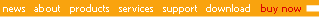
<style>
.page{position:relative;width:319px;height:17px;background:#f9a30e}
.page>*{position:absolute;margin:0}
.t1{font:9.8px "Tahoma";letter-spacing:0.01em;color:#ffffff}
.t2{font:9.8px "Tahoma";letter-spacing:0.01em;color:#db0303}
</style>
<div class="page">
<p class="t1" style="left:34px;top:4px;width:26px;height:8px">about</p>
<p class="t1" style="left:70px;top:4px;width:39px;height:10px">products</p>
<p class="t1" style="left:119px;top:5px;width:34px;height:7px">services</p>
<p class="t1" style="left:163px;top:5px;width:34px;height:9px">support</p>
<p class="t1" style="left:206px;top:4px;width:44px;height:8px">download</p>
<p class="t2" style="left:261px;top:4px;width:40px;height:10px">buy now</p>
<p class="t1" style="left:3px;top:7px;width:22px;height:5px">news</p>
</div>
